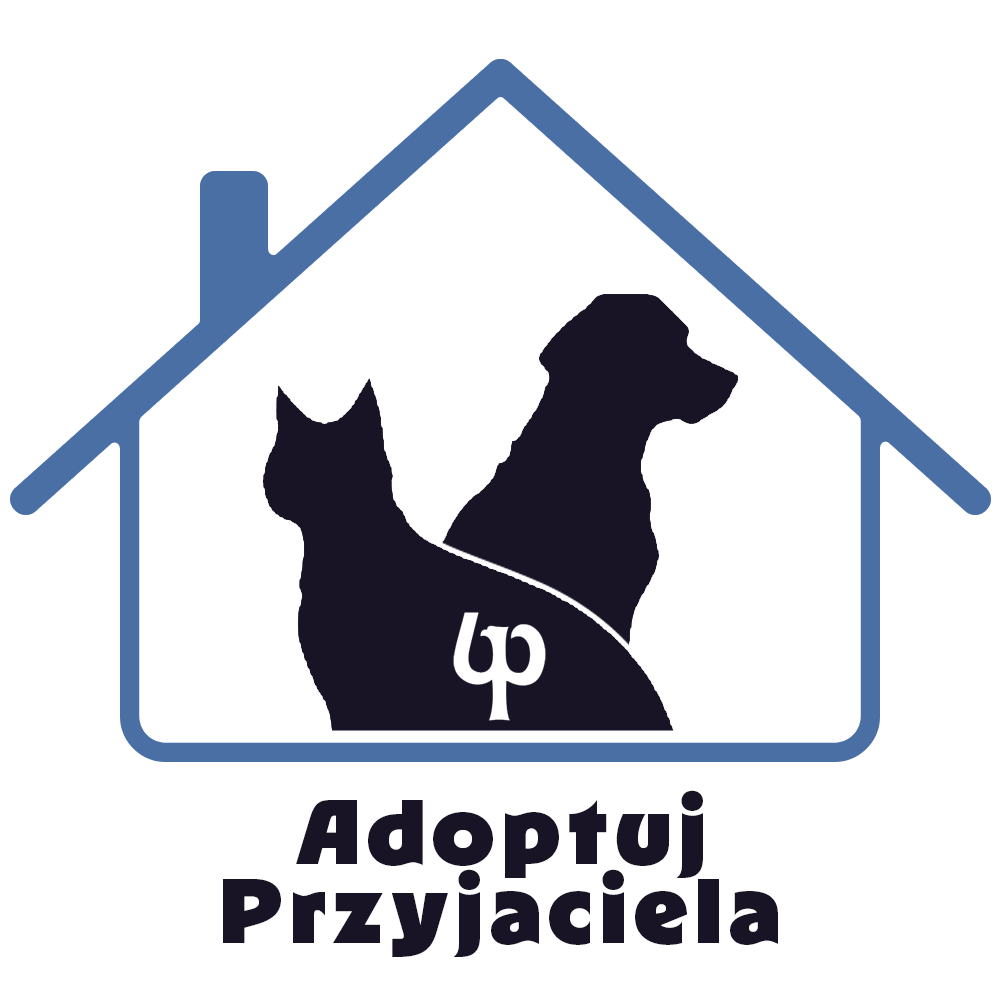
<style>
.page{position:relative;width:1000px;height:1000px;background:#ffffff}
.page>*{position:absolute;margin:0}
.t1{font:91.7px/79.2px "RLAqva-Black";letter-spacing:0.08em;color:#181425}
</style>
<div class="page">
<p class="t1" style="left:223px;top:790px;width:555px;height:167px;text-align:center">Adoptuj <br>Przyjaciela</p>
</div>
